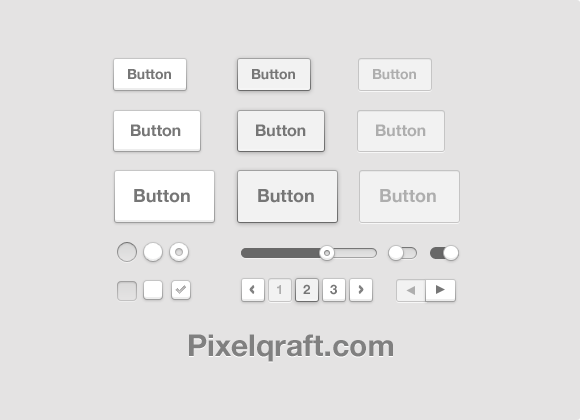
<style>
.page{position:relative;width:580px;height:420px;background:#e4e3e3}
.page>*{position:absolute;margin:0}
.t1{font:14px "HelveticaNeue-Bold";color:#767676}
.t2{font:14px "HelveticaNeue-Bold";color:#aeaeae}
.t3{font:16px "HelveticaNeue-Bold";color:#767676}
.t4{font:16px "HelveticaNeue-Bold";color:#aeaeae}
.t5{font:18px "HelveticaNeue-Bold";color:#767676}
.t6{font:18px "HelveticaNeue-Bold";color:#aeaeae}
.t7{font:13px "HelveticaNeue-Bold";color:#aeaeae}
.t8{font:13px "HelveticaNeue-Bold";color:#767676}
.t9{font:30px "HelveticaNeue-Bold";color:#808080}
</style>
<div class="page">
<p class="t1" style="left:128px;top:69px;width:43px;height:11px">Button</p>
<p class="t1" style="left:252px;top:69px;width:43px;height:11px">Button</p>
<p class="t2" style="left:373px;top:69px;width:43px;height:11px">Button</p>
<p class="t3" style="left:131px;top:124px;width:50px;height:13px">Button</p>
<p class="t3" style="left:256px;top:124px;width:50px;height:13px">Button</p>
<p class="t4" style="left:376px;top:124px;width:50px;height:13px">Button</p>
<p class="t5" style="left:134px;top:189px;width:56px;height:14px">Button</p>
<p class="t5" style="left:258px;top:189px;width:56px;height:14px">Button</p>
<p class="t6" style="left:380px;top:189px;width:56px;height:14px">Button</p>
<p class="t7" style="left:277px;top:285px;width:4px;height:9px">1</p>
<p class="t8" style="left:303px;top:284px;width:7px;height:10px">2</p>
<p class="t8" style="left:330px;top:284px;width:7px;height:11px">3</p>
<p class="t9" style="left:189px;top:334px;width:204px;height:28px">Pixelqraft.com</p>
</div>
